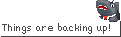
<style>
.page{position:relative;width:121px;height:37px;background:#ffffff}
.page>*{position:absolute;margin:0}
.t1{font:8px "untitled-regular";letter-spacing:0.1em;color:#474747;scale:0.96 1}
</style>
<div class="page">
<p class="t1" style="left:2px;top:23px;width:108px;height:11px">Things are backing up!</p>
</div>
